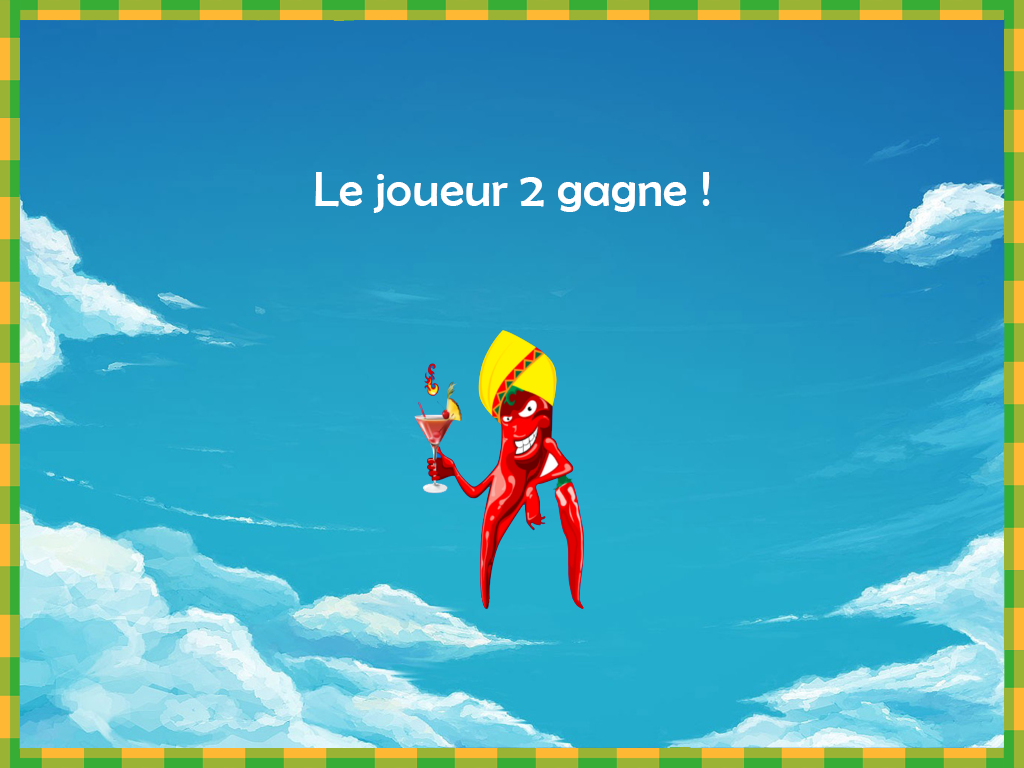
<style>
.page{position:relative;width:1024px;height:768px}
.page>*{position:absolute;margin:0}
.t1{font:50px "BerlinSansFB-Reg";color:#ffffff}
</style>
<div class="page">
<p class="t1" style="left:315px;top:172px;width:395px;height:41px">Le joueur 2 gagne !</p>
</div>
